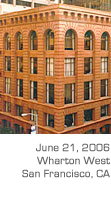
<style>
.page{position:relative;width:111px;height:215px;background:#ffffff}
.page>*{position:absolute;margin:0}
.t1{font:11px/13px "EurostileRegular";color:#666666;font-weight:bold}
</style>
<div class="page">
<p class="t1" style="left:22px;top:143px;width:88px;height:36px;text-align:right">June 21, 2006<br>Wharton West<br>San Francisco, CA</p>
</div>
